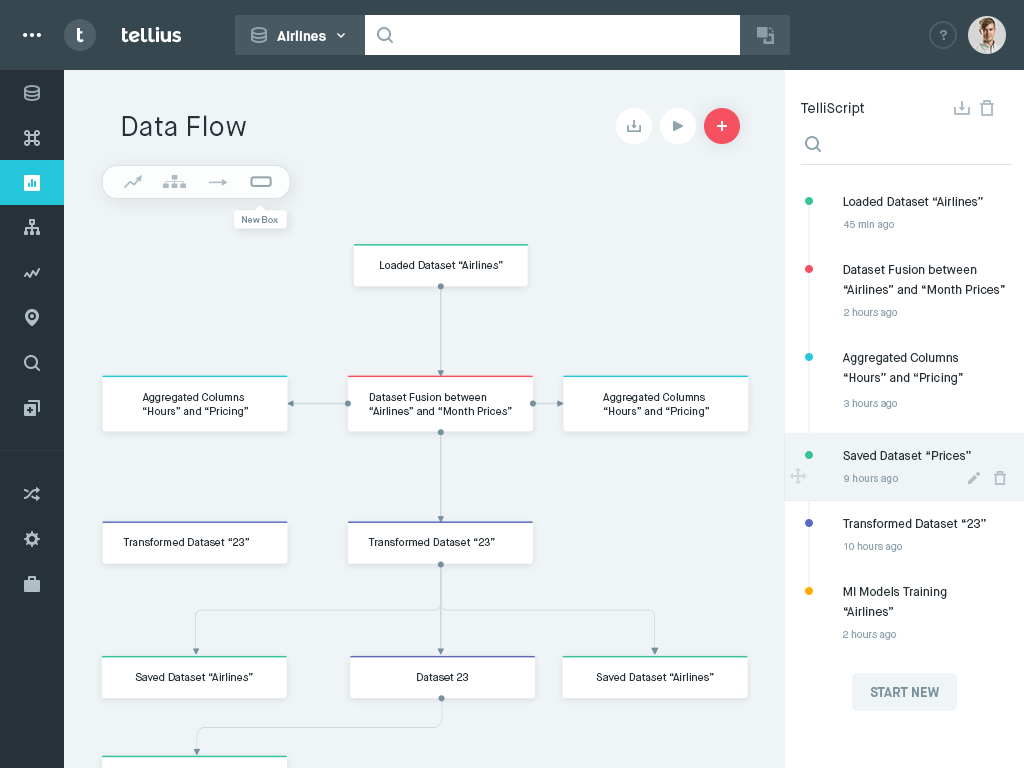
<style>
.page{position:relative;width:1024px;height:768px;background:#eff4f7}
.page>*{position:absolute;margin:0}
.t1{font:20px "MontserratAlternates-Bold";letter-spacing:-0.04em;color:#ffffff}
.t2{font:14px "MaisonNeue-Bold";color:#ffffff}
.t3{font:14px "MaisonNeue-Bold";color:#78909c}
.t4{font:14px "MaisonNeue-Book";color:#263238}
.t5{font:28px "MaisonNeue-Book";color:#263238}
.t6{font:12px "MaisonNeue-Book";color:#263238}
.t7{font:9.1px "MaisonNeue-Book";color:#78909c}
.t8{font:10px "MaisonNeue-Book";color:#90a4ae}
.t9{font:10.6px "MaisonNeue-Book";color:#263238}
.t10{font:12px/19.5px "MaisonNeue-Book";color:#263238}
.t11{font:10.6px/14.7px "MaisonNeue-Book";color:#263238}
.t12{font:13px "MaisonNeue-Bold";color:#78909c;text-transform:uppercase}
</style>
<div class="page">
<p class="t1" style="left:77px;top:28px;width:7px;height:15px">t</p>
<p class="t1" style="left:122px;top:26px;width:59px;height:17px">tellius</p>
<p class="t2" style="left:277px;top:30px;width:49px;height:11px">Airlines</p>
<p class="t3" style="left:939px;top:30px;width:9px;height:10px">?</p>
<p class="t4" style="left:801px;top:102px;width:64px;height:14px">TelliScript</p>
<p class="t5" style="left:122px;top:115px;width:124px;height:21px">Data Flow</p>
<p class="t6" style="left:843px;top:196px;width:140px;height:10px">Loaded Dataset “Airlines”</p>
<p class="t7" style="left:242px;top:216px;width:36px;height:7px">New Box</p>
<p class="t8" style="left:844px;top:220px;width:50px;height:10px">45 min ago</p>
<p class="t9" style="left:380px;top:261px;width:123px;height:8px">Loaded Dataset “Airlines”</p>
<p class="t10" style="left:843px;top:264px;width:162px;height:30px">Dataset Fusion between<br>“Airlines” and “Month Prices”</p>
<p class="t8" style="left:844px;top:308px;width:54px;height:10px">2 hours ago</p>
<p class="t10" style="left:842px;top:352px;width:121px;height:33px">Aggregated Columns <br>“Hours” and “Pricing”</p>
<p class="t11" style="left:142px;top:393px;width:106px;height:24px">Aggregated Columns <br>“Hours” and “Pricing”</p>
<p class="t11" style="left:369px;top:393px;width:143px;height:22px">Dataset Fusion between<br>“Airlines” and “Month Prices”</p>
<p class="t11" style="left:603px;top:393px;width:106px;height:24px">Aggregated Columns <br>“Hours” and “Pricing”</p>
<p class="t8" style="left:844px;top:399px;width:54px;height:10px">3 hours ago</p>
<p class="t6" style="left:843px;top:450px;width:128px;height:10px">Saved Dataset “Prices”</p>
<p class="t8" style="left:844px;top:474px;width:54px;height:10px">9 hours ago</p>
<p class="t6" style="left:843px;top:518px;width:143px;height:10px">Transformed Dataset “23”</p>
<p class="t9" style="left:123px;top:538px;width:126px;height:8px">Transformed Dataset “23”</p>
<p class="t9" style="left:368px;top:538px;width:127px;height:8px">Transformed Dataset “23”</p>
<p class="t8" style="left:844px;top:542px;width:59px;height:10px">10 hours ago</p>
<p class="t10" style="left:843px;top:586px;width:104px;height:30px">Ml Models Training<br>“Airlines”</p>
<p class="t8" style="left:843px;top:630px;width:54px;height:10px">2 hours ago</p>
<p class="t9" style="left:135px;top:673px;width:118px;height:8px">Saved Dataset “Airlines”</p>
<p class="t9" style="left:417px;top:673px;width:52px;height:8px">Dataset 23</p>
<p class="t9" style="left:596px;top:673px;width:118px;height:8px">Saved Dataset “Airlines”</p>
<p class="t12" style="left:870px;top:687px;width:69px;height:10px">Start New</p>
</div>
